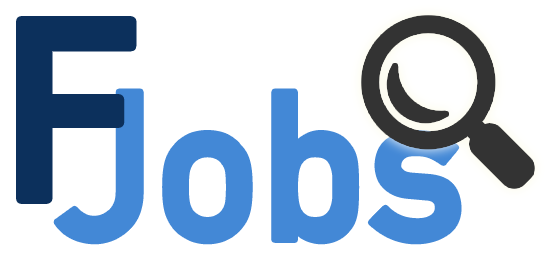
<style>
.page{position:relative;width:550px;height:262px;background:#ffffff}
.page>*{position:absolute;margin:0}
.t1{font:250px "DINAlternate-Bold";color:#0c305c}
.t2{font:208.3px "DINAlternate-Bold";color:#4388d6}
</style>
<div class="page">
<p class="t1" style="left:21px;top:21px;width:111px;height:178px">F</p>
<p class="t2" style="left:56px;top:91px;width:403px;height:151px">Jobs</p>
</div>
